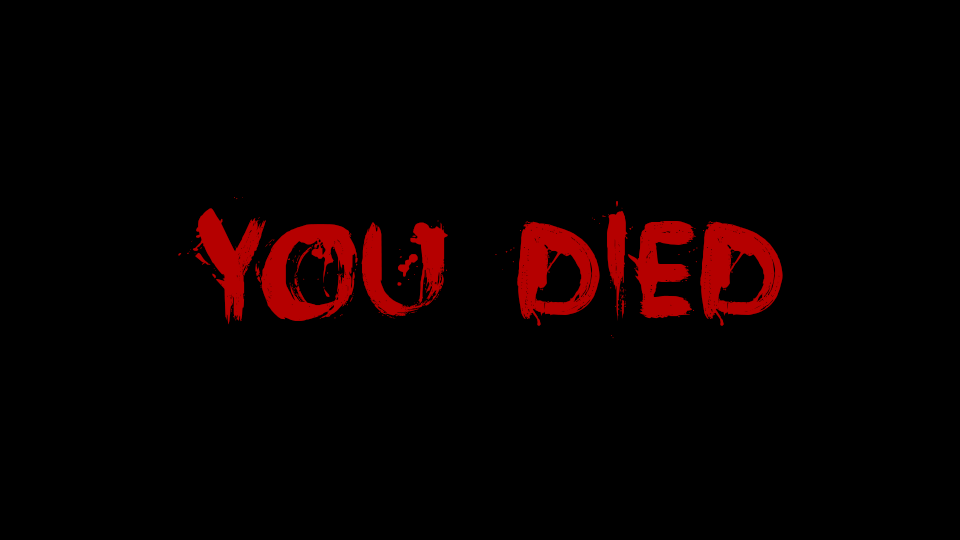
<style>
.page{position:relative;width:960px;height:540px;background:#000000}
.page>*{position:absolute;margin:0}
.t1{font:150px "FaceYourFears";color:#b50000}
</style>
<div class="page">
<p class="t1" style="left:178px;top:197px;width:605px;height:142px">YOU Died</p>
</div>
